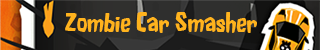
<style>
.page{position:relative;width:320px;height:50px}
.page>*{position:absolute;margin:0}
.t1{font:24px "FluffySlacksBTN";color:#ffb31d}
</style>
<div class="page">
<p class="t1" style="left:65px;top:12px;width:192px;height:21px">Zombie Car Smasher</p>
</div>
